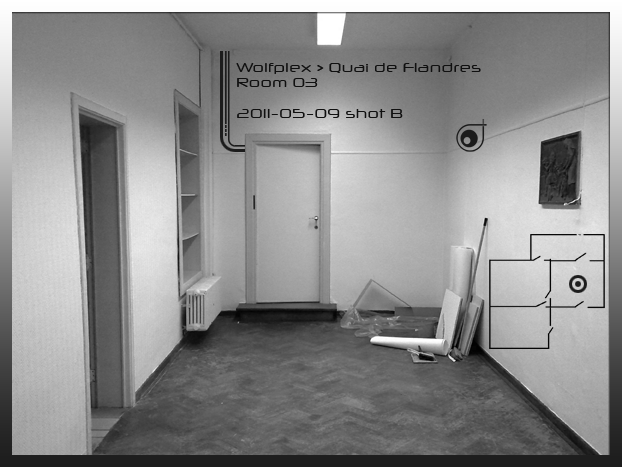
<style>
.page{position:relative;width:622px;height:467px}
.page>*{position:absolute;margin:0}
.t1{font:13px "NeuropolXFree";color:#101010}
</style>
<div class="page">
<p class="t1" style="left:236px;top:63px;width:245px;height:55px">Wolfplex &gt; Quai de Flandres<br>Room 03<br><br>2011-05-09 shot B</p>
</div>
